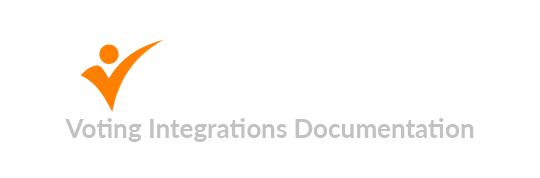
<style>
.page{position:relative;width:540px;height:178px;background:#ffffff}
.page>*{position:absolute;margin:0}
.t1{font:26px "Lato-Bold";color:#c2c2c2}
</style>
<div class="page">
<p class="t1" style="left:65px;top:118px;width:409px;height:24px">Voting Integrations Documentation</p>
</div>
